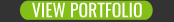
<style>
.page{position:relative;width:174px;height:22px;background:#83bf17}
.page>*{position:absolute;margin:0}
.t1{font:18px "Oswald-Regular";color:#ffffff}
</style>
<div class="page">
<p class="t1" style="left:32px;top:2px;width:110px;height:16px">VIEW PORTFOLIO</p>
</div>
